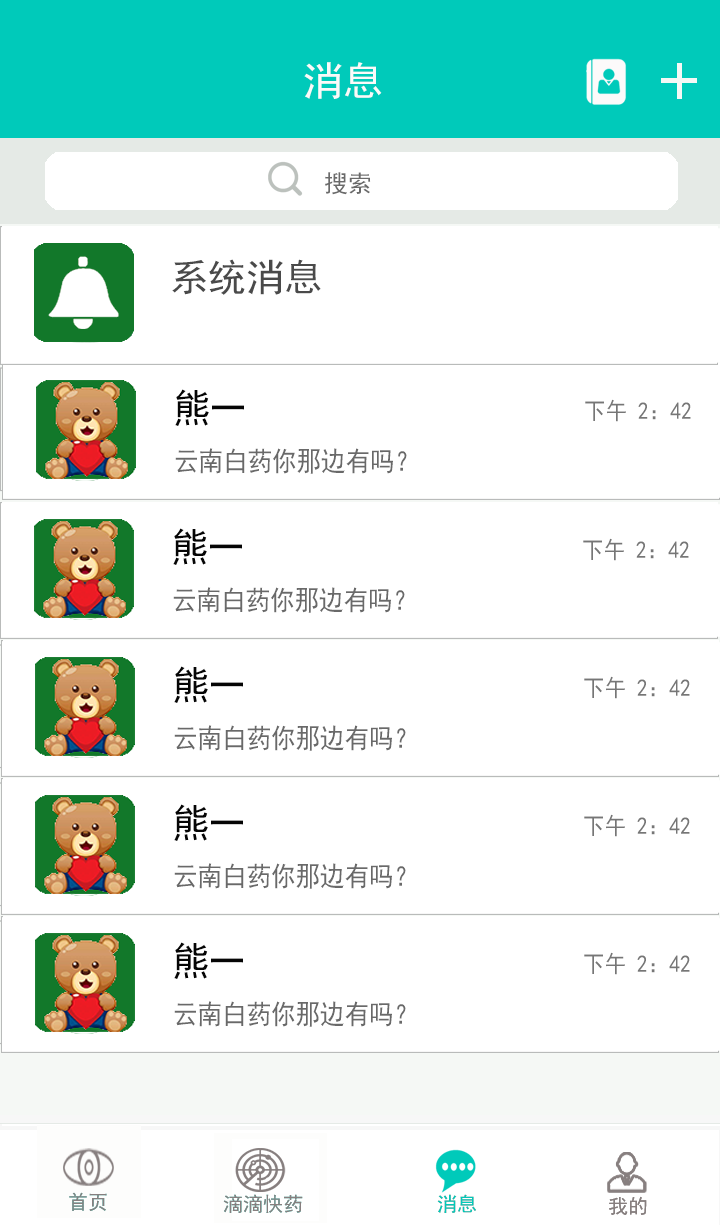
<style>
.page{position:relative;width:720px;height:1225px;background:#ffffff}
.page>*{position:absolute;margin:0}
.t1{font:40px "SimHei";color:#fafaf9}
.t2{font:24px "SimHei";color:#6a6a6a}
.t3{font:38.1px "SimHei";color:#4a4a4a}
.t4{font:40.1px "SimHei";color:#050505;scale:0.9 1}
.t5{font:24px "SimHei";color:#767676;scale:0.9 1}
.t6{font:27.3px "SimHei";color:#696969;scale:0.9 1}
</style>
<div class="page">
<p class="t1" style="left:304px;top:62px;width:78px;height:37px">消息</p>
<p class="t2" style="left:325px;top:172px;width:46px;height:23px">搜索</p>
<p class="t3" style="left:172px;top:259px;width:149px;height:36px">系统消息</p>
<p class="t4" style="left:175px;top:389px;width:69px;height:37px">熊一</p>
<p class="t5" style="left:585px;top:399px;width:106px;height:23px">下午 2：42</p>
<p class="t6" style="left:175px;top:448px;width:232px;height:26px">云南白药你那边有吗？</p>
<p class="t4" style="left:173px;top:528px;width:69px;height:37px">熊一</p>
<p class="t5" style="left:583px;top:538px;width:106px;height:23px">下午 2：42</p>
<p class="t6" style="left:173px;top:587px;width:232px;height:26px">云南白药你那边有吗？</p>
<p class="t4" style="left:174px;top:666px;width:69px;height:37px">熊一</p>
<p class="t5" style="left:584px;top:676px;width:106px;height:23px">下午 2：42</p>
<p class="t6" style="left:174px;top:725px;width:232px;height:26px">云南白药你那边有吗？</p>
<p class="t4" style="left:174px;top:804px;width:69px;height:37px">熊一</p>
<p class="t5" style="left:584px;top:814px;width:106px;height:23px">下午 2：42</p>
<p class="t6" style="left:174px;top:863px;width:232px;height:26px">云南白药你那边有吗？</p>
<p class="t4" style="left:174px;top:942px;width:69px;height:37px">熊一</p>
<p class="t5" style="left:584px;top:952px;width:106px;height:23px">下午 2：42</p>
<p class="t6" style="left:174px;top:1001px;width:232px;height:26px">云南白药你那边有吗？</p>
</div>
